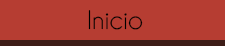
<style>
.page{position:relative;width:225px;height:46px;background:#b63d32}
.page>*{position:absolute;margin:0}
.t1{font:24px "CaviarDreams";color:#000000}
</style>
<div class="page">
<p class="t1" style="left:88px;top:10px;width:55px;height:20px">Inicio</p>
</div>
